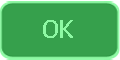
<style>
.page{position:relative;width:120px;height:60px;background:#36a04c}
.page>*{position:absolute;margin:0}
.t1{font:28px "Consolas";color:#8ef9a4;scale:1.12 1}
</style>
<div class="page">
<p class="t1" style="left:43px;top:20px;width:30px;height:18px">OK</p>
</div>
